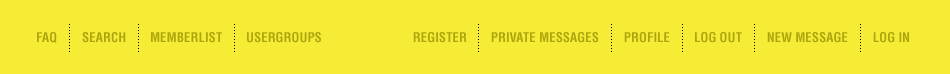
<style>
.page{position:relative;width:950px;height:74px;background:#f6ec36}
.page>*{position:absolute;margin:0}
.t1{font:13px "Helvetica-Condensed-Bold";color:#ada50c}
</style>
<div class="page">
<p class="t1" style="left:37px;top:32px;width:20px;height:11px">FAQ</p>
<p class="t1" style="left:82px;top:32px;width:44px;height:11px">SEARCH</p>
<p class="t1" style="left:151px;top:32px;width:71px;height:11px">MEMBERLIST</p>
<p class="t1" style="left:247px;top:32px;width:74px;height:11px">USERGROUPS</p>
<p class="t1" style="left:413px;top:32px;width:54px;height:11px">REGISTER</p>
<p class="t1" style="left:491px;top:32px;width:108px;height:11px">PRIVATE MESSAGES</p>
<p class="t1" style="left:624px;top:32px;width:46px;height:11px">PROFILE</p>
<p class="t1" style="left:695px;top:32px;width:47px;height:11px">LOG OUT</p>
<p class="t1" style="left:767px;top:32px;width:81px;height:11px">NEW MESSAGE</p>
<p class="t1" style="left:873px;top:32px;width:36px;height:11px">LOG IN</p>
</div>
